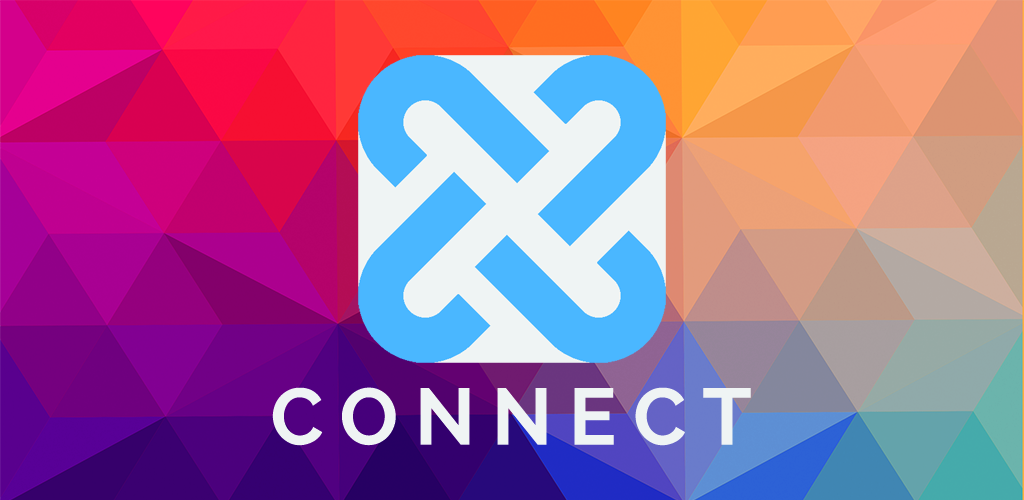
<style>
.page{position:relative;width:1024px;height:500px}
.page>*{position:absolute;margin:0}
.t1{font:80px "Raleway-Bold";letter-spacing:0.2em;color:#eff4f4;text-transform:uppercase}
</style>
<div class="page">
<p class="t1" style="left:272px;top:387px;width:479px;height:59px">CONNECT</p>
</div>
